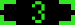
<style>
.page{position:relative;width:75px;height:25px;background:#000000}
.page>*{position:absolute;margin:0}
.t1{font:50px "Thintel";color:#30e722}
</style>
<div class="page">
<p class="t1" style="left:32px;top:1px;width:13px;height:22px">3</p>
</div>
